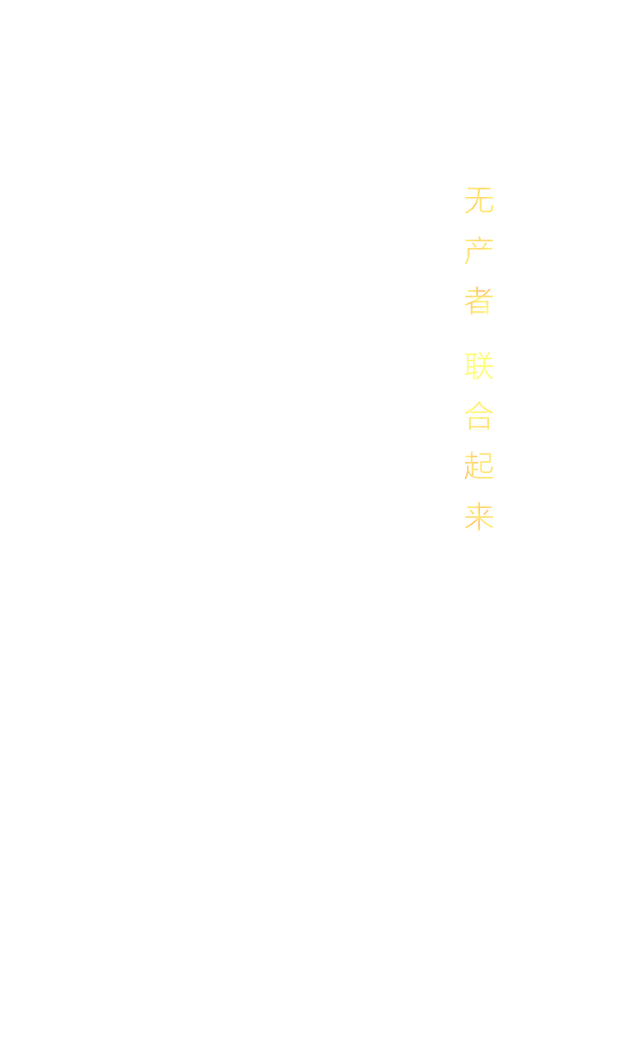
<style>
.page{position:relative;width:640px;height:1040px;background:#ffffff}
.page>*{position:absolute;margin:0}
.t1{font:30px/14.4px "FZLTXHJW--GB1-0";letter-spacing:0.2em;color:#fee46e;text-transform:uppercase}
</style>
<div class="page">
<p class="t1" style="left:464px;top:187px;width:30px;height:344px">无 产 者  联 合 起 来</p>
</div>
